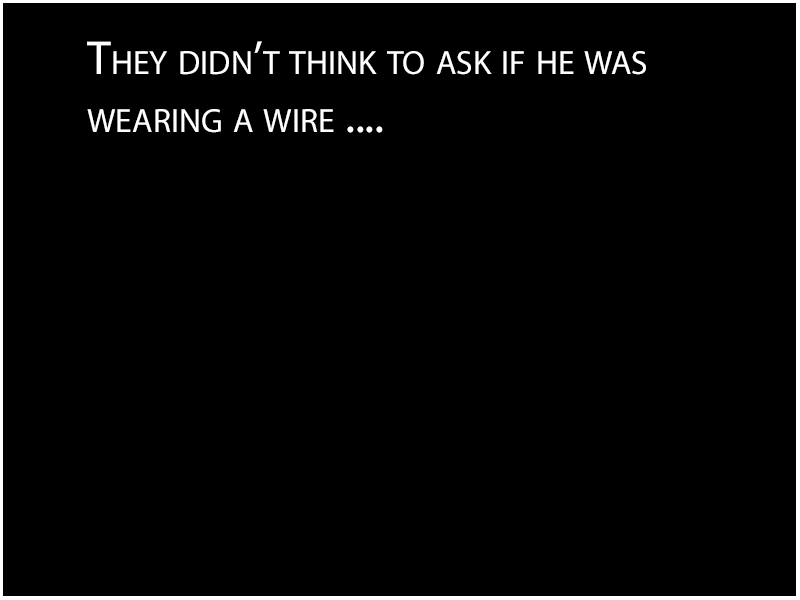
<style>
.page{position:relative;width:800px;height:600px;background:#000000}
.page>*{position:absolute;margin:0}
.t1{font:48px "MyriadPro-Regular";color:#ffffff;font-variant:small-caps}
</style>
<div class="page">
<p class="t1" style="left:87px;top:41px;width:559px;height:92px">They didn’t think to ask if he was <br>wearing a wire ....</p>
</div>
